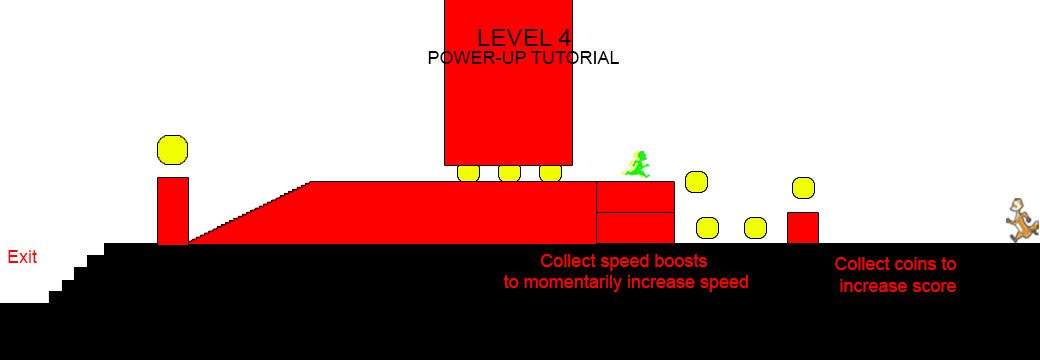
<style>
.page{position:relative;width:1040px;height:360px;background:#ffffff}
.page>*{position:absolute;margin:0}
.t1{font:24px "ArialMT";color:#000000}
.t2{font:18px "ArialMT";color:#000000}
.t3{font:18px "ArialMT";color:#ff0000}
</style>
<div class="page">
<p class="t1" style="left:478px;top:29px;width:93px;height:17px">LEVEL 4</p>
<p class="t2" style="left:428px;top:51px;width:191px;height:13px">POWER-UP TUTORIAL</p>
<p class="t3" style="left:8px;top:250px;width:29px;height:13px">Exit</p>
<p class="t3" style="left:503px;top:254px;width:245px;height:38px;text-align:center">Collect speed boosts <br>to momentarily increase speed</p>
<p class="t3" style="left:835px;top:257px;width:121px;height:35px;text-align:center">Collect coins to <br>increase score</p>
</div>
